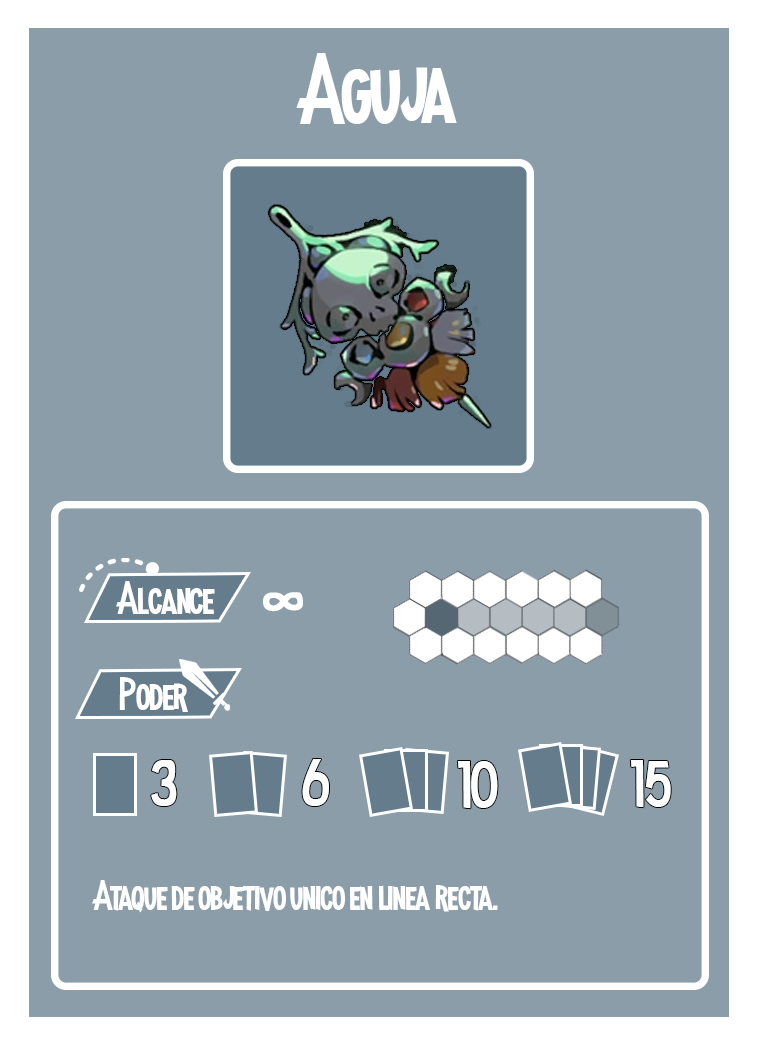
<style>
.page{position:relative;width:758px;height:1047px;background:#8b9da9}
.page>*{position:absolute;margin:0}
.t1{font:100px "MadnessHyperactive";color:#ffffff}
.t2{font:45.8px "MadnessHyperactive";color:#ffffff}
.t3{font:56.9px "MadnessHyperactive";color:#ffffff}
.t4{font:66.3px "MadnessHyperactive";color:#ffffff}
.t5{font:41.7px "MadnessHyperactive";color:#ffffff}
</style>
<div class="page">
<p class="t1" style="left:296px;top:53px;width:161px;height:71px">Aguja</p>
<p class="t2" style="left:116px;top:581px;width:99px;height:33px">Alcance</p>
<p class="t3" style="left:263px;top:592px;width:40px;height:20px;rotate:90deg">8</p>
<p class="t2" style="left:119px;top:677px;width:69px;height:35px">Poder</p>
<p class="t4" style="left:151px;top:760px;width:26px;height:46px">3</p>
<p class="t4" style="left:302px;top:759px;width:27px;height:47px">6</p>
<p class="t4" style="left:457px;top:761px;width:41px;height:48px">10</p>
<p class="t4" style="left:630px;top:760px;width:41px;height:48px">15</p>
<p class="t5" style="left:92px;top:880px;width:406px;height:33px">Ataque de objetivo unico en linea recta.</p>
</div>
